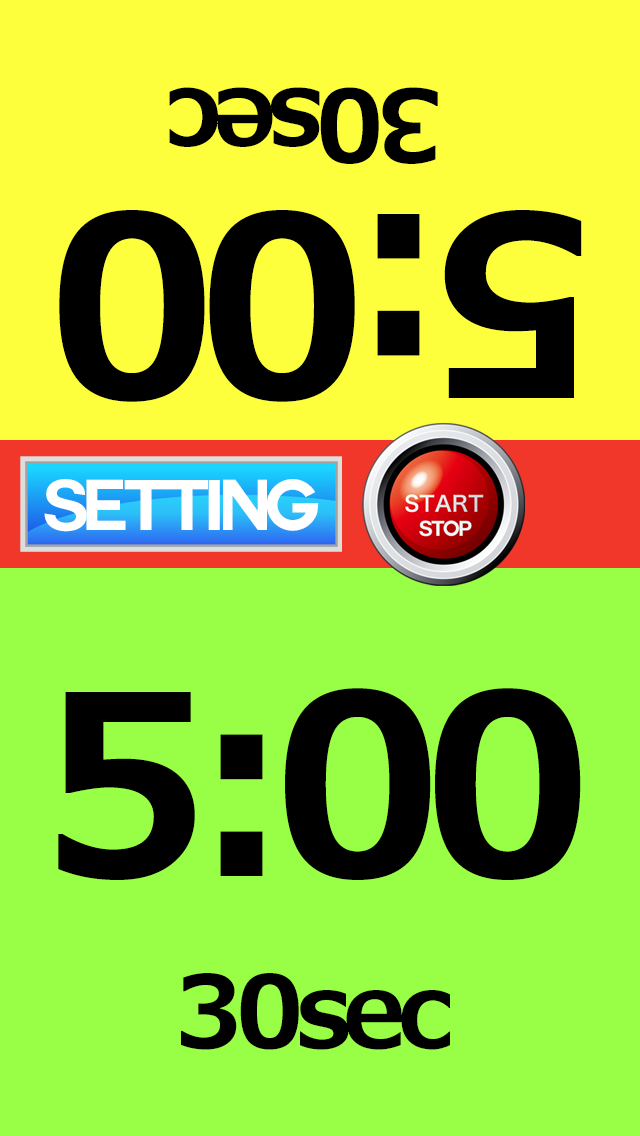
<style>
.page{position:relative;width:640px;height:1136px;background:#99fe46}
.page>*{position:absolute;margin:0}
.t1{font:100px "MeiryoUI-Bold";letter-spacing:-0.075em;color:#000000}
.t2{font:250px "MeiryoUI-Bold";letter-spacing:-0.075em;color:#000000}
.t3{font:70px "Couture-Bold";letter-spacing:-0.075em;color:#ffffff}
</style>
<div class="page">
<p class="t1" style="left:169px;top:87px;width:269px;height:77px;rotate:180deg">30sec</p>
<p class="t2" style="left:59px;top:210px;width:523px;height:192px;rotate:180deg">5:00</p>
<p class="t3" style="left:44px;top:479px;width:275px;height:53px">setting</p>
<p class="t2" style="left:58px;top:688px;width:523px;height:192px">5:00</p>
<p class="t1" style="left:181px;top:973px;width:269px;height:77px">30sec</p>
</div>
